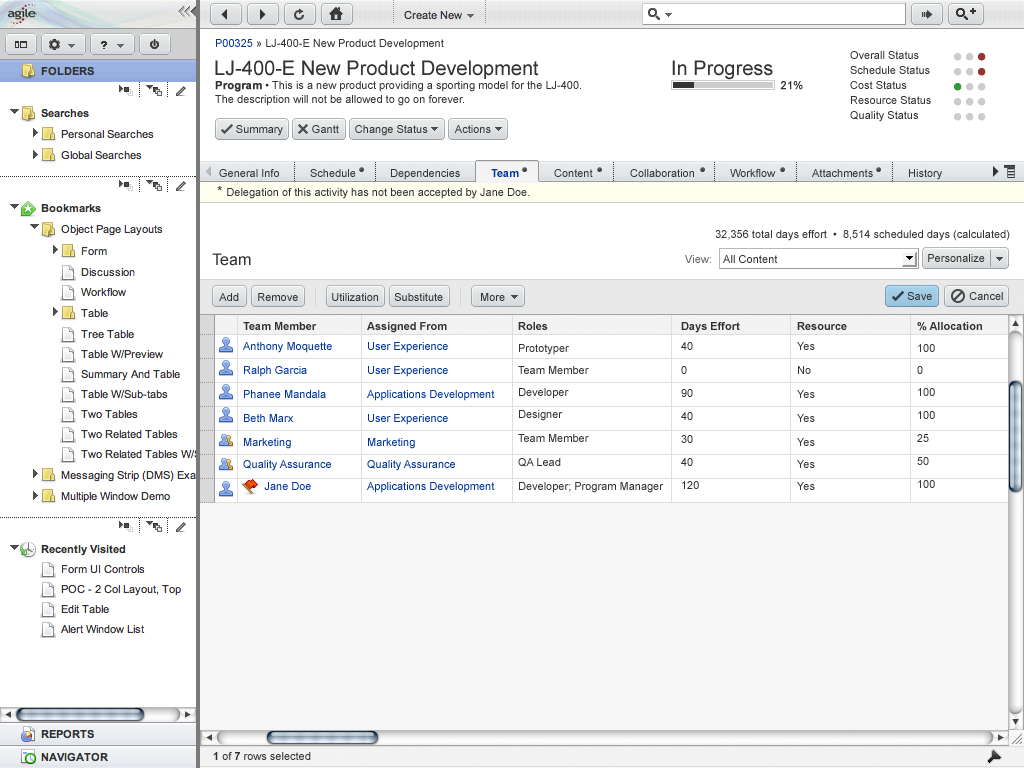
<style>
.page{position:relative;width:1024px;height:768px;background:#ffffff}
.page>*{position:absolute;margin:0}
.t1{font:11px "ArialMT";color:#333333}
.t2{font:11px "ArialMT";color:#003399}
.t3{font:20px "ArialMT";color:#333333}
.t4{font:11px/14px "ArialMT";color:#333333}
.t5{font:11px/14px "Arial-BoldMT";color:#333333;font-weight:bold}
.t6{font:11px "ArialMT";color:#333333;font-weight:bold}
.t7{font:11px "Arial-BoldMT";color:#003399}
.t8{font:14px "ArialMT";color:#333333}
.t9{font:16px "ArialMT";letter-spacing:0.005em;color:#303030}
.t10{font:11px "ArialMT";letter-spacing:0.005em;color:#666666}
.t11{font:11px "ArialMT";letter-spacing:0.005em;color:#303030}
.t12{font:11px "ArialMT";color:#303030}
.t13{font:11px/24px "ArialMT";color:#003399}
.t14{font:11px/20px "Arial-BoldMT";color:#303030}
.t15{font:11px/20px "ArialMT";color:#003399}
.t16{font:11px/22px "ArialMT";color:#003399}
.t17{font:11px/24px "ArialMT";color:#333333}
.t18{font:11px/22px "ArialMT";color:#333333}
.t19{font:11px/23px "ArialMT";color:#303030}
.t20{font:11px/20px "ArialMT";color:#303030}
.t21{font:11px/20px "ArialMT";color:#333333}
.t22{font:11px/23px "ArialMT";color:#333333}
.t23{font:11px "Arial-BoldMT";color:#303030}
</style>
<div class="page">
<p class="t1" style="left:216px;top:39px;width:228px;height:11px"><span class="t2">P00325</span> » LJ-400-E New Product Development</p>
<p class="t3" style="left:215px;top:60px;width:324px;height:19px">LJ-400-E New Product Development</p>
<p class="t3" style="left:672px;top:60px;width:101px;height:20px">In Progress</p>
<p class="t4" style="left:215px;top:81px;width:366px;height:25px"><span class="t5">Program</span> • This is a new product providing a sporting model for the LJ-400.  <br>The description will not be allowed to go on forever.</p>
<p class="t6" style="left:780px;top:81px;width:23px;height:9px">21%</p>
<p class="t1" style="left:236px;top:125px;width:47px;height:11px">Summary</p>
<p class="t1" style="left:312px;top:125px;width:27px;height:8px">Gantt</p>
<p class="t1" style="left:355px;top:125px;width:73px;height:11px">Change Status</p>
<p class="t1" style="left:454px;top:125px;width:37px;height:8px">Actions</p>
<p class="t1" style="left:219px;top:169px;width:60px;height:8px">General Info</p>
<p class="t1" style="left:310px;top:169px;width:46px;height:8px">Schedule</p>
<p class="t1" style="left:391px;top:169px;width:69px;height:11px">Dependencies</p>
<p class="t7" style="left:491px;top:169px;width:28px;height:8px">Team</p>
<p class="t1" style="left:554px;top:169px;width:39px;height:8px">Content</p>
<p class="t1" style="left:630px;top:169px;width:64px;height:8px">Collaboration</p>
<p class="t1" style="left:730px;top:169px;width:46px;height:8px">Workflow</p>
<p class="t1" style="left:812px;top:169px;width:61px;height:8px">Attachments</p>
<p class="t1" style="left:909px;top:169px;width:33px;height:11px">History</p>
<p class="t1" style="left:217px;top:186px;width:313px;height:13px"><span class="t8">* </span>Delegation of this activity has not been accepted by Jane Doe.</p>
<p class="t1" style="left:715px;top:230px;width:295px;height:11px">32,356 total days effort  •  8,514 scheduled days (calculated)</p>
<p class="t9" style="left:212px;top:253px;width:39px;height:13px">Team</p>
<p class="t10" style="left:685px;top:255px;width:26px;height:8px">View:</p>
<p class="t11" style="left:723px;top:255px;width:55px;height:8px">All Content</p>
<p class="t12" style="left:928px;top:254px;width:57px;height:8px">Personalize</p>
<p class="t12" style="left:219px;top:293px;width:20px;height:8px">Add</p>
<p class="t12" style="left:258px;top:293px;width:40px;height:8px">Remove</p>
<p class="t12" style="left:332px;top:293px;width:46px;height:8px">Utilization</p>
<p class="t12" style="left:394px;top:293px;width:49px;height:8px">Substitute</p>
<p class="t12" style="left:481px;top:293px;width:24px;height:8px">More</p>
<p class="t12" style="left:907px;top:292px;width:25px;height:8px">Save</p>
<p class="t12" style="left:969px;top:292px;width:34px;height:8px">Cancel</p>
<p class="t13" style="left:243px;top:322px;width:89px;height:168px"><span class="t14">Team Member<br></span><span class="t15">Anthony Moquette<br></span>Ralph Garcia<br>Phanee Mandala<br>Beth Marx<br>Marketing<br><span class="t16">Quality Assurance<br>       Jane Doe</span></p>
<p class="t13" style="left:367px;top:322px;width:128px;height:171px"><span class="t14">Assigned From<br></span><span class="t15">User Experience<br></span>User Experience<br>Applications Development<br>User Experience<br>Marketing<br><span class="t16">Quality Assurance<br>Applications Development</span></p>
<p class="t17" style="left:518px;top:322px;width:146px;height:171px"><span class="t14">Roles<br></span><span class="t18">Prototyper<br>Team Member<br>Developer<br>Designer<br></span>Team Member<br>QA Lead<br>Developer; Program Manager</p>
<p class="t19" style="left:681px;top:322px;width:59px;height:167px"><span class="t14">Days Effort<br></span><span class="t20">40<br>0 <br></span>90<br>40<br>30<br>40<br>120</p>
<p class="t17" style="left:797px;top:322px;width:50px;height:168px"><span class="t14">Resource<br></span><span class="t21">Yes<br></span>No <br>Yes<br>Yes<br>Yes<br><span class="t18">Yes<br>Yes</span></p>
<p class="t22" style="left:917px;top:322px;width:65px;height:166px"><span class="t14">% Allocation<br></span><span class="t18">100<br>0<br>100<br></span>100<br>25<br>50<br>100</p>
<p class="t12" style="left:213px;top:752px;width:98px;height:8px"><span class="t23">1</span> of <span class="t23">7</span> rows selected</p>
</div>
